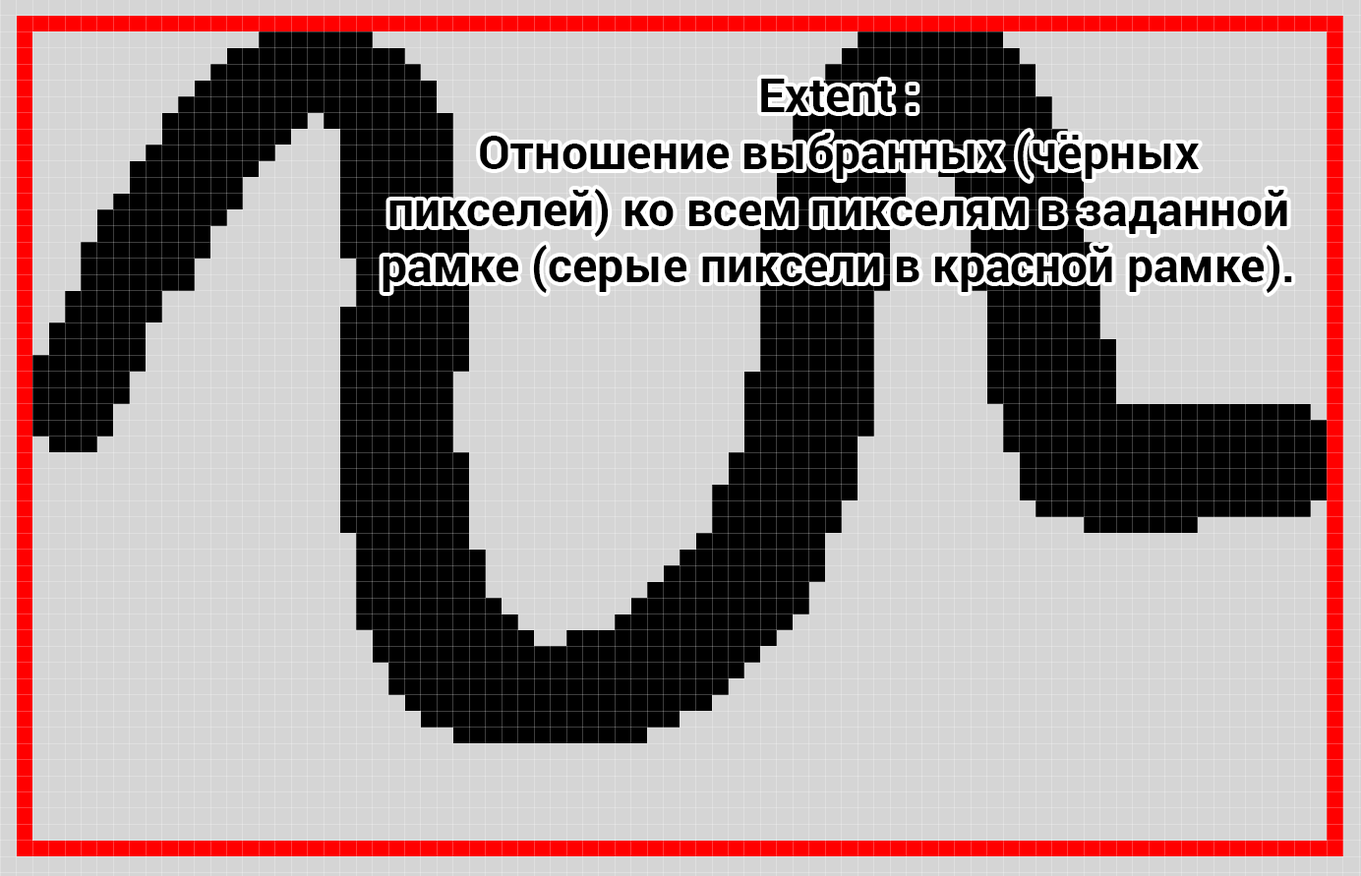
<style>
.page{position:relative;width:1361px;height:876px;background:#d5d5d5}
.page>*{position:absolute;margin:0}
.t1{font:47.2px "Roboto-Bold";color:#000000}
</style>
<div class="page">
<p class="t1" style="left:383px;top:79px;width:909px;height:214px;text-align:center">Extent :<br>Отношение выбранных (чёрных пикселей) ко всем пикселям в заданной рамке (серые пиксели в красной рамке).</p>
</div>
